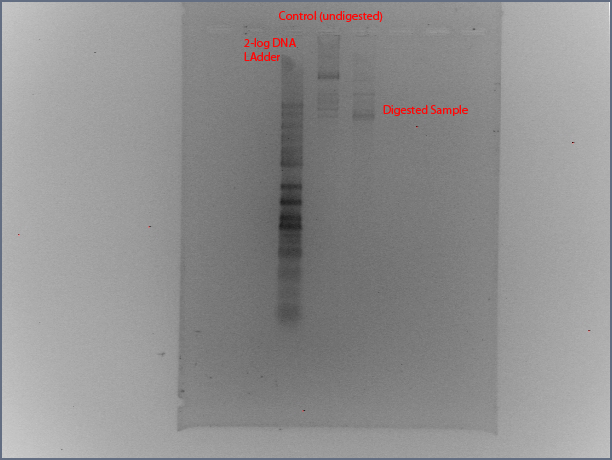
<style>
.page{position:relative;width:612px;height:460px}
.page>*{position:absolute;margin:0}
.t1{font:12px "MyriadPro-Regular";color:#ff0808}
</style>
<div class="page">
<p class="t1" style="left:279px;top:11px;width:104px;height:11px">Control (undigested)</p>
<p class="t1" style="left:244px;top:38px;width:52px;height:23px">2-log DNA LAdder</p>
<p class="t1" style="left:383px;top:105px;width:85px;height:11px">Digested Sample</p>
</div>
